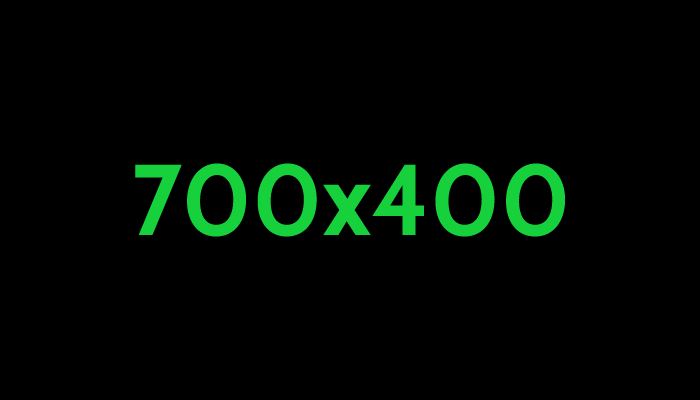
<style>
.page{position:relative;width:700px;height:400px;background:#000000}
.page>*{position:absolute;margin:0}
.t1{font:100px "Cabin-Bold";color:#17d13c}
</style>
<div class="page">
<p class="t1" style="left:135px;top:163px;width:430px;height:74px">700x400</p>
</div>
